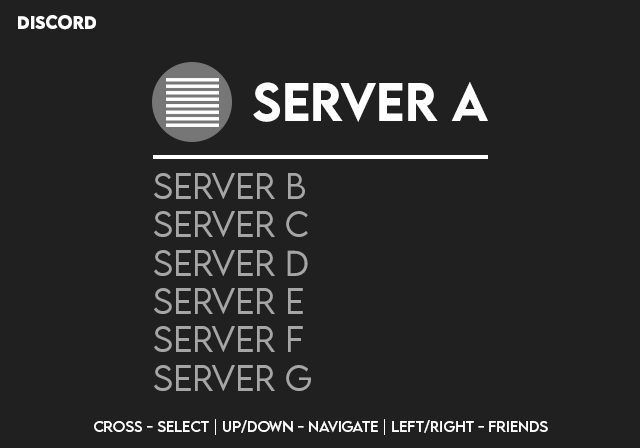
<style>
.page{position:relative;width:640px;height:448px;background:#202020}
.page>*{position:absolute;margin:0}
.t1{font:16px "LEMONMILK-Bold";color:#ffffff}
.t2{font:48px "LEMONMILK-Medium";color:#ffffff}
.t3{font:32px "LEMONMILK-Light";color:#a6a6a6}
.t4{font:14px "LEMONMILK-Regular";color:#ffffff}
</style>
<div class="page">
<p class="t1" style="left:18px;top:15px;width:78px;height:15px">DISCORD</p>
<p class="t2" style="left:253px;top:82px;width:235px;height:40px">SERVER A</p>
<p class="t3" style="left:154px;top:173px;width:157px;height:218px">SERVER B<br>SERVER C<br>SERVER D<br>SERVER E<br>SERVER F<br>SERVER G</p>
<p class="t4" style="left:94px;top:419px;width:454px;height:16px">CROSS - SELECT | UP/DOWN - NAVIGATE | LEFT/RIGHT - FRIENDS</p>
</div>
